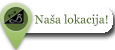
<style>
.page{position:relative;width:115px;height:50px;background:#ffffff}
.page>*{position:absolute;margin:0}
.t1{font:12px "Vani";color:#576f36}
</style>
<div class="page">
<p class="t1" style="left:34px;top:14px;width:74px;height:12px">Naša lokacija!</p>
</div>
